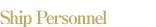
<style>
.page{position:relative;width:156px;height:27px;background:#ffffff}
.page>*{position:absolute;margin:0}
.t1{font:18px "RyuminPro-ExBold";letter-spacing:-0.08em;color:#c4a956}
</style>
<div class="page">
<p class="t1" style="left:0px;top:10px;width:107px;height:17px">Ship Personnel</p>
</div>
